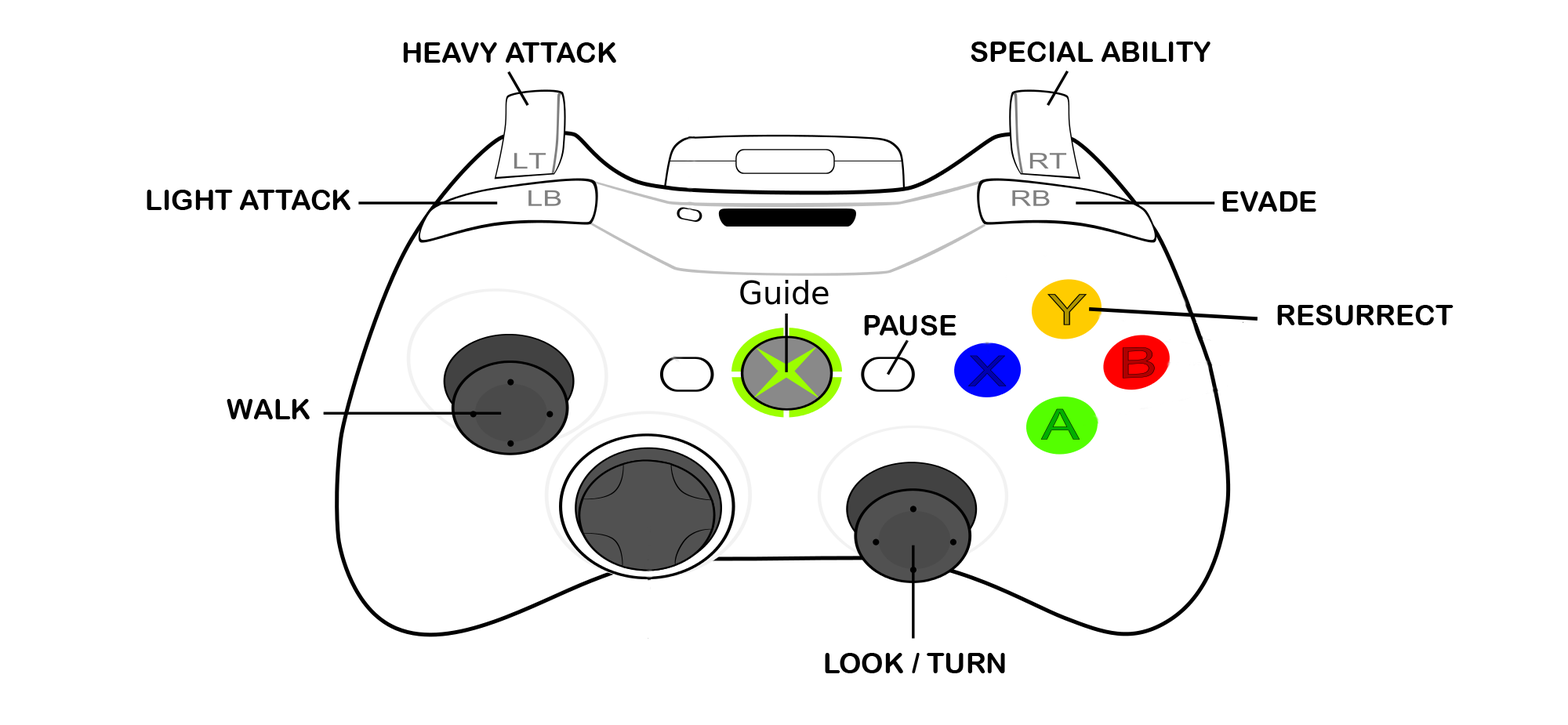
<style>
.page{position:relative;width:1568px;height:725px;background:#ffffff}
.page>*{position:absolute;margin:0}
.t1{font:28.2px "ArialRoundedMTBold";color:#000000}
</style>
<div class="page">
<p class="t1" style="left:971px;top:42px;width:239px;height:20px">SPECIAL ABILITY</p>
<p class="t1" style="left:403px;top:42px;width:213px;height:21px">HEAVY ATTACK</p>
<p class="t1" style="left:147px;top:190px;width:203px;height:20px">LIGHT ATTACK</p>
<p class="t1" style="left:1222px;top:191px;width:94px;height:21px">EVADE</p>
<p class="t1" style="left:1277px;top:305px;width:177px;height:20px">RESURRECT</p>
<p class="t1" style="left:864px;top:315px;width:92px;height:21px">PAUSE</p>
<p class="t1" style="left:227px;top:399px;width:83px;height:20px">WALK</p>
<p class="t1" style="left:825px;top:653px;width:180px;height:20px">LOOK / TURN</p>
</div>
